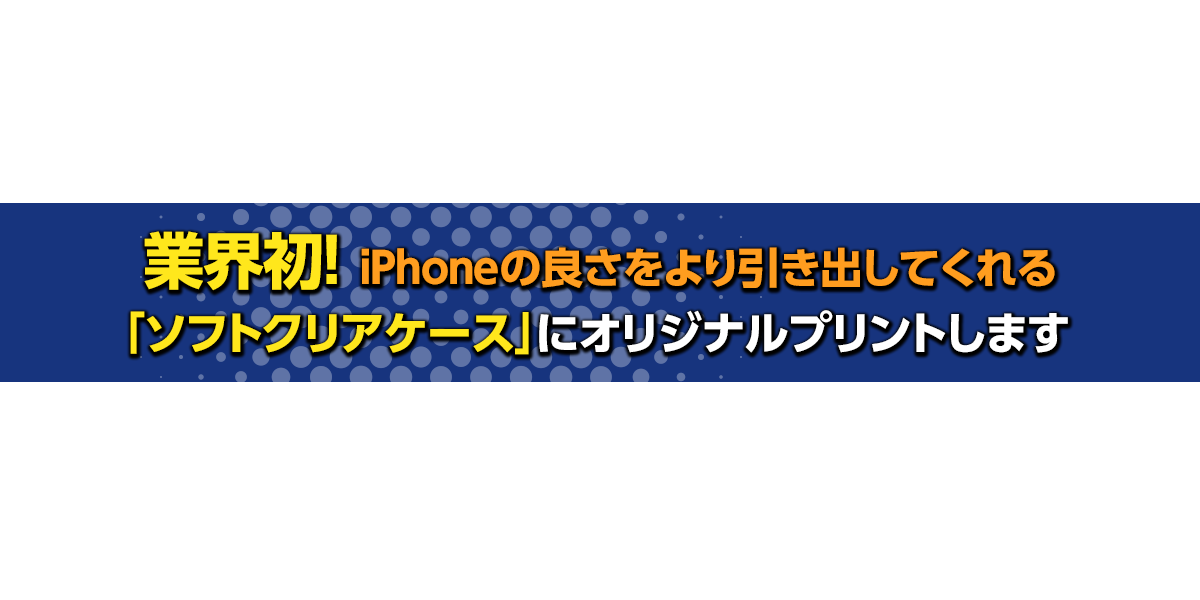
<style>
.page{position:relative;width:1200px;height:600px;background:#ffffff}
.page>*{position:absolute;margin:0}
.t1{font:42.6px "UDShinGoPro-Bold";letter-spacing:-0.025em;color:#ff9d1f}
.t2{font:61.2px "UDShinGoPro-Bold";letter-spacing:-0.025em;color:#ffe71c}
.t3{font:45.1px "UDShinGoPro-Bold";letter-spacing:-0.025em;color:#ffffff}
.t4{font:45.1px "UDShinGoPro-Bold";letter-spacing:-0.025em;color:#ffe71c}
</style>
<div class="page">
<p class="t1" style="left:144px;top:231px;width:911px;height:60px"><span class="t2">業界初！ </span>iPhoneの良さをより引き出してくれる</p>
<p class="t3" style="left:130px;top:310px;width:938px;height:45px"><span class="t4">「ソフトクリアケース」</span>にオリジナルプリントします</p>
</div>
